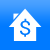
<style>
.page{position:relative;width:50px;height:50px;background:#007aff}
.page>*{position:absolute;margin:0}
.t1{font:19.5px "Roboto-Regular";color:#007aff;scale:1.15 1}
</style>
<div class="page">
<p class="t1" style="left:20px;top:18px;width:11px;height:19px">$</p>
</div>
